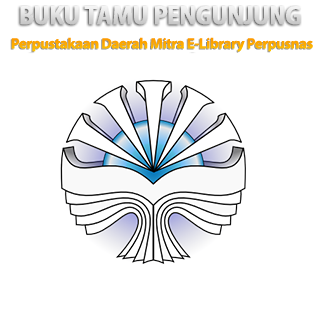
<style>
.page{position:relative;width:320px;height:319px;background:#ffffff}
.page>*{position:absolute;margin:0}
.t1{font:14.7px "MyriadPro-Bold";letter-spacing:-0.025em;color:#fdab00}
</style>
<div class="page">
<p class="t1" style="left:11px;top:37px;width:302px;height:15px">Perpustakaan Daerah Mitra E-Library Perpusnas</p>
</div>
